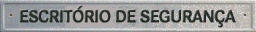
<style>
.page{position:relative;width:256px;height:32px}
.page>*{position:absolute;margin:0}
.t1{font:17.3px "CorporateSBQ-Bold";letter-spacing:-0.06em;color:#2a302a;text-transform:uppercase;font-weight:bold}
</style>
<div class="page">
<p class="t1" style="left:20px;top:5px;width:216px;height:23px">escritório de segurança</p>
</div>
